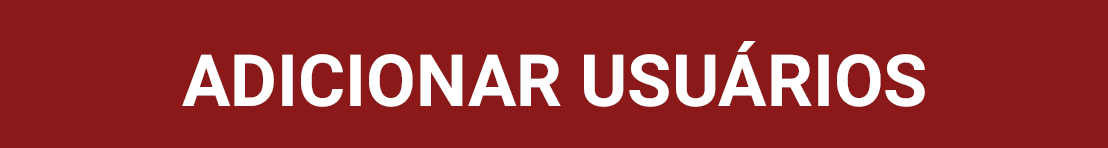
<style>
.page{position:relative;width:1108px;height:148px;background:#8b1919}
.page>*{position:absolute;margin:0}
.t1{font:72px "Roboto-Bold";color:#ffffff}
</style>
<div class="page">
<p class="t1" style="left:182px;top:41px;width:743px;height:66px">ADICIONAR USUÁRIOS</p>
</div>
